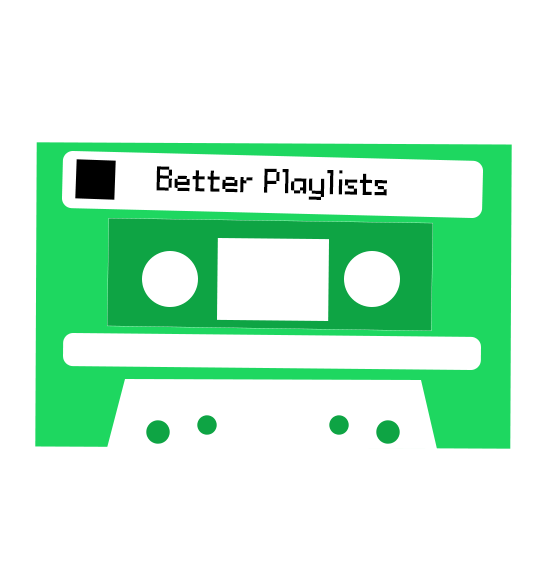
<style>
.page{position:relative;width:543px;height:567px;background:#ffffff}
.page>*{position:absolute;margin:0}
.t1{font:36px "Power-Red-and-Green";color:#000000}
</style>
<div class="page">
<p class="t1" style="left:156px;top:166px;width:231px;height:34px;rotate:1deg">Better Playlists</p>
</div>
